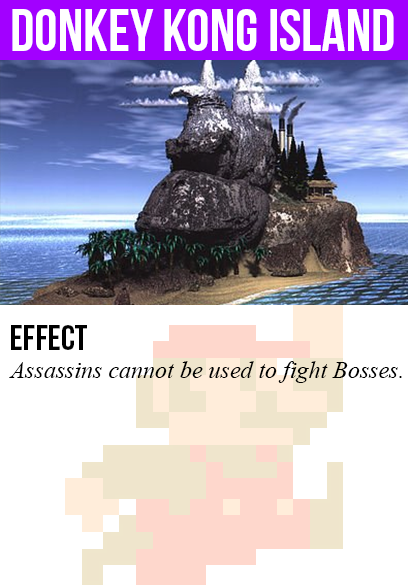
<style>
.page{position:relative;width:408px;height:585px;background:#ffffff}
.page>*{position:absolute;margin:0}
.t1{font:60px "BebasNeue";color:#ffffff}
.t2{font:36px "BebasNeue";color:#000000}
.t3{font:24px "TimesNewRomanPS-ItalicMT";color:#000000}
</style>
<div class="page">
<p class="t1" style="left:12px;top:9px;width:382px;height:42px">donkey kong island</p>
<p class="t2" style="left:11px;top:325px;width:76px;height:25px">Effect</p>
<p class="t3" style="left:9px;top:361px;width:393px;height:22px">Assassins cannot be used to fight Bosses.</p>
</div>
